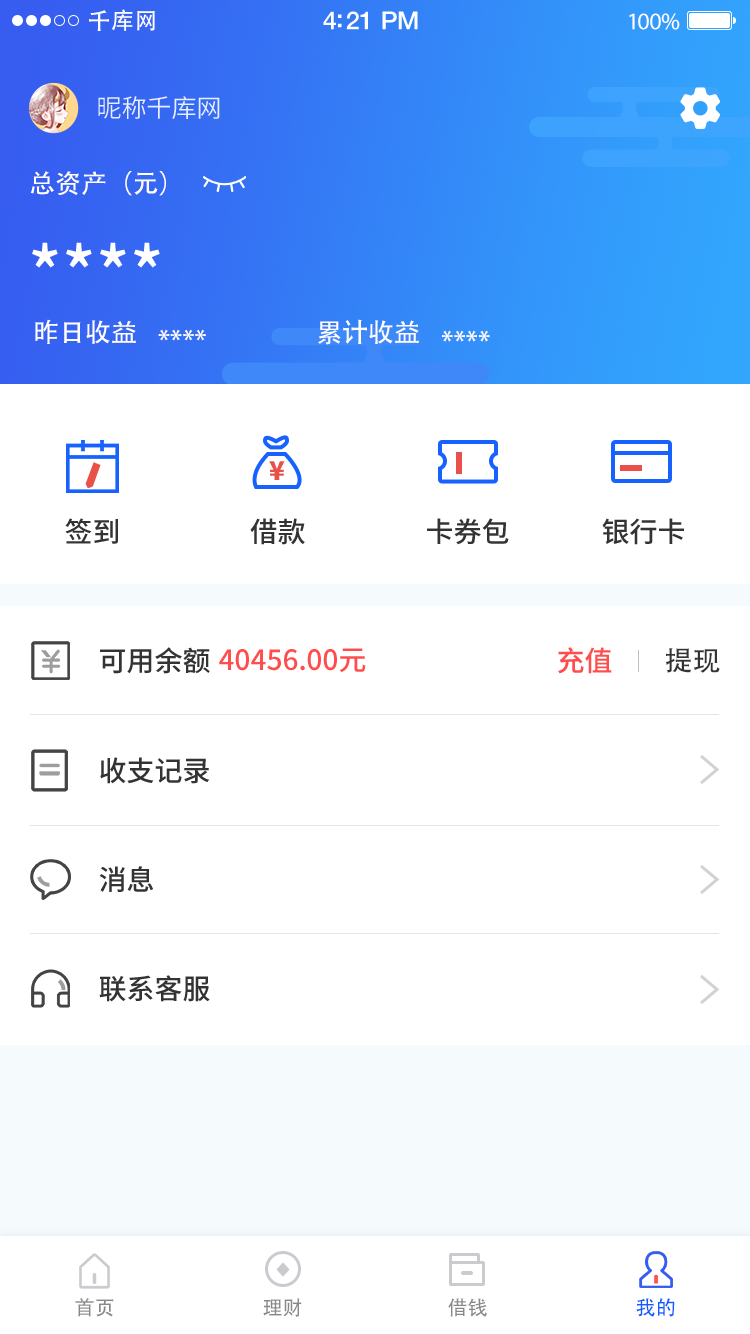
<style>
.page{position:relative;width:750px;height:1334px;background:#ffffff}
.page>*{position:absolute;margin:0}
.t1{font:23px "AdobeHeitiStd-Regular";letter-spacing:0.02em;color:#ffffff}
.t2{font:25px "HelveticaNeue-Medium";letter-spacing:-0.02em;color:#ffffff}
.t3{font:24px "MyriadPro-Regular";letter-spacing:-0.02em;color:#ffffff}
.t4{font:25px "SourceHanSansCN-Normal";color:#e8eeff}
.t5{font:26px "AdobeHeitiStd-Regular";color:#ffffff}
.t6{font:70.3px "SourceHanSansCN-Medium";color:#ffffff}
.t7{font:26.3px "AdobeHeitiStd-Regular";color:#ffffff}
.t8{font:26px "SourceHanSansCN-Heavy";color:#e9504a}
.t9{font:28px "SourceHanSansCN-Medium";color:#333333}
.t10{font:28px "SourceHanSansCN-Medium";color:#ff4c4c}
.t11{font:28px "AdobeHeitiStd-Regular";color:#333333}
.t12{font:20px "AdobeHeitiStd-Regular";color:#888888}
.t13{font:20.3px "AdobeHeitiStd-Regular";color:#0f5dff}
</style>
<div class="page">
<p class="t1" style="left:89px;top:9px;width:66px;height:22px">千库网</p>
<p class="t2" style="left:323px;top:11px;width:95px;height:19px">4:21 PM</p>
<p class="t3" style="left:629px;top:13px;width:51px;height:17px">100%</p>
<p class="t4" style="left:98px;top:96px;width:122px;height:23px">昵称千库网</p>
<p class="t5" style="left:30px;top:171px;width:136px;height:25px">总资产（元）</p>
<p class="t6" style="left:32px;top:242px;width:128px;height:26px">****</p>
<p class="t5" style="left:35px;top:319px;width:101px;height:25px">昨日收益</p>
<p class="t5" style="left:158px;top:329px;width:48px;height:12px">****</p>
<p class="t7" style="left:318px;top:319px;width:101px;height:26px">累计收益</p>
<p class="t7" style="left:442px;top:330px;width:48px;height:12px">****</p>
<p class="t8" style="left:269px;top:461px;width:16px;height:19px">¥</p>
<p class="t9" style="left:65px;top:518px;width:53px;height:26px">签到</p>
<p class="t9" style="left:250px;top:518px;width:55px;height:27px">借款</p>
<p class="t9" style="left:427px;top:518px;width:82px;height:27px">卡券包</p>
<p class="t9" style="left:602px;top:518px;width:82px;height:27px">银行卡</p>
<p class="t9" style="left:100px;top:647px;width:110px;height:27px">可用余额</p>
<p class="t10" style="left:219px;top:648px;width:147px;height:25px">40456.00元</p>
<p class="t10" style="left:558px;top:647px;width:54px;height:27px">充值</p>
<p class="t11" style="left:666px;top:648px;width:54px;height:25px">提现</p>
<p class="t9" style="left:100px;top:757px;width:110px;height:27px">收支记录</p>
<p class="t9" style="left:99px;top:866px;width:54px;height:26px">消息</p>
<p class="t9" style="left:99px;top:975px;width:111px;height:27px">联系客服</p>
<p class="t12" style="left:75px;top:1298px;width:39px;height:19px">首页</p>
<p class="t12" style="left:263px;top:1298px;width:39px;height:19px">理财</p>
<p class="t12" style="left:448px;top:1298px;width:39px;height:19px">借钱</p>
<p class="t13" style="left:636px;top:1298px;width:39px;height:19px">我的</p>
</div>
